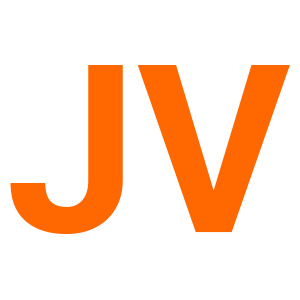
<style>
.page{position:relative;width:300px;height:300px;background:#ffffff}
.page>*{position:absolute;margin:0}
.t1{font:235px "Roboto-Bold";color:#ff6700}
</style>
<div class="page">
<p class="t1" style="left:10px;top:65px;width:280px;height:169px">JV</p>
</div>
